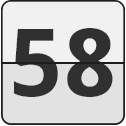
<style>
.page{position:relative;width:126px;height:126px;background:#f1f1f1}
.page>*{position:absolute;margin:0}
.t1{font:94px "DroidSans-Bold";letter-spacing:0.02em;color:#303030}
</style>
<div class="page">
<p class="t1" style="left:14px;top:28px;width:99px;height:69px">58</p>
</div>
